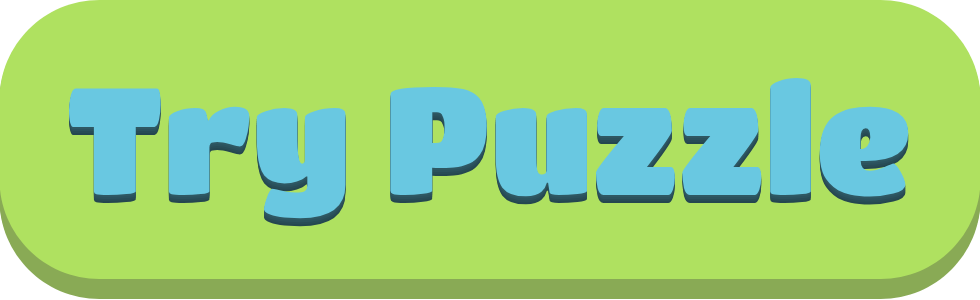
<style>
.page{position:relative;width:980px;height:300px;background:#afe160}
.page>*{position:absolute;margin:0}
.t1{font:150px "TitanOne";color:#69c8e1}
</style>
<div class="page">
<p class="t1" style="left:69px;top:78px;width:840px;height:141px">Try Puzzle</p>
</div>
